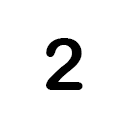
<style>
.page{position:relative;width:128px;height:128px;background:#ffffff}
.page>*{position:absolute;margin:0}
.t1{font:73px "ArialRoundedMTBold";letter-spacing:0.4em;color:#000000}
</style>
<div class="page">
<p class="t1" style="left:46px;top:38px;width:37px;height:52px">2</p>
</div>
